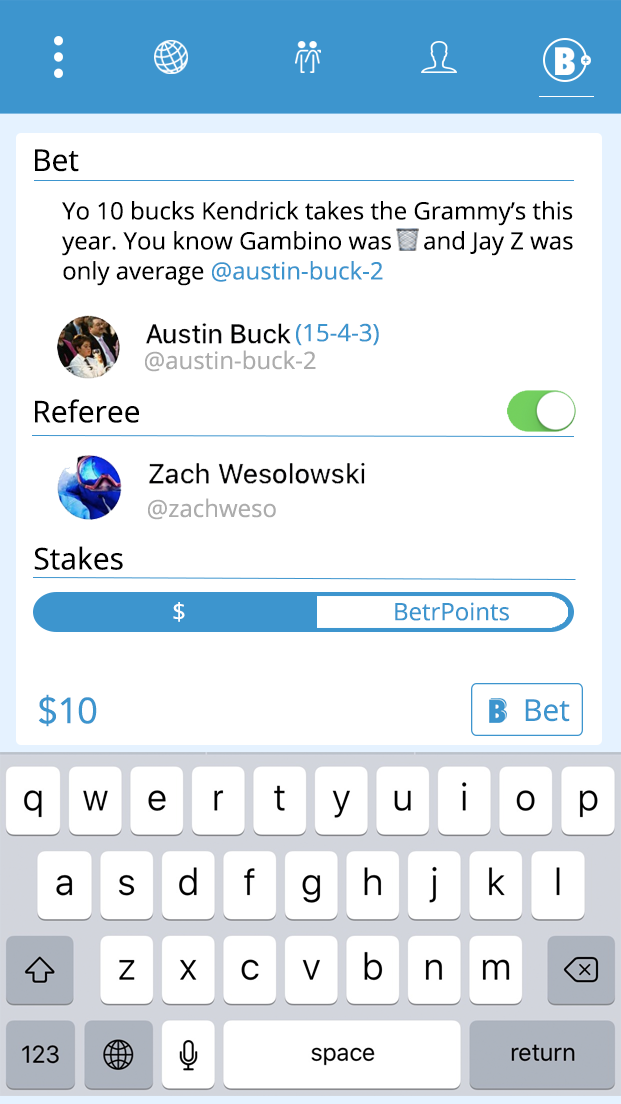
<style>
.page{position:relative;width:621px;height:1104px;background:#ffffff}
.page>*{position:absolute;margin:0}
.t1{font:30px "OpenSans";color:#000000}
.t2{font:24px/30px "OpenSans";color:#000000}
.t3{font:24px/30px "OpenSans";color:#3d95ce}
.t4{font:24px "OpenSans";color:#3d95ce}
.t5{font:24px "OpenSans";color:#acacac}
.t6{font:36px "Avenir-Roman";color:#3d95ce}
.t7{font:30px "OpenSans";color:#3d95ce}
</style>
<div class="page">
<p class="t1" style="left:35px;top:149px;width:44px;height:23px">Bet</p>
<p class="t2" style="left:62px;top:201px;width:511px;height:85px">Yo 10 bucks Kendrick takes the Grammy’s this <br>year. You know Gambino was     and Jay Z was <br>only average <span class="t3">@austin-buck-2</span></p>
<p class="t4" style="left:296px;top:323px;width:83px;height:23px">(15-4-3)</p>
<p class="t5" style="left:145px;top:350px;width:171px;height:22px">@austin-buck-2</p>
<p class="t1" style="left:35px;top:399px;width:104px;height:24px">Referee</p>
<p class="t5" style="left:148px;top:498px;width:128px;height:22px">@zachweso</p>
<p class="t1" style="left:34px;top:546px;width:89px;height:24px">Stakes</p>
<p class="t6" style="left:38px;top:694px;width:59px;height:33px">$10</p>
<p class="t7" style="left:525px;top:699px;width:45px;height:23px">Bet</p>
</div>
